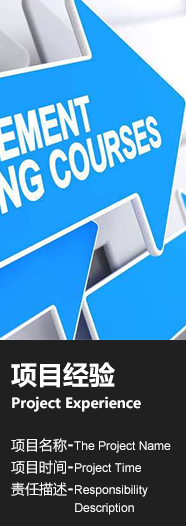
<style>
.page{position:relative;width:186px;height:526px;background:#202020}
.page>*{position:absolute;margin:0}
.t1{font:14px/24px "MicrosoftYaHei-Bold";color:#ffffff}
.t2{font:26px/24px "MicrosoftYaHei-Bold";color:#ffffff}
.t3{font:12px/22px "ArialMT";color:#ffffff}
.t4{font:14px/22px "MicrosoftYaHei";color:#ffffff}
.t5{font:16px/22px "MicrosoftYaHei-Bold";color:#ffffff}
.t6{font:12px/18px "ArialMT";color:#ffffff}
</style>
<div class="page">
<p class="t1" style="left:11px;top:362px;width:130px;height:50px"><span class="t2">项目经验<br></span>Project Experience</p>
<p class="t3" style="left:11px;top:438px;width:160px;height:77px"><span class="t4">项目名称</span><span class="t5">-</span>The Project Name<br><span class="t4">项目时间</span><span class="t5">-</span>Project Time<br><span class="t4">责任描述</span><span class="t5">-</span>Responsibility <br><span class="t6">                   Description</span></p>
</div>
